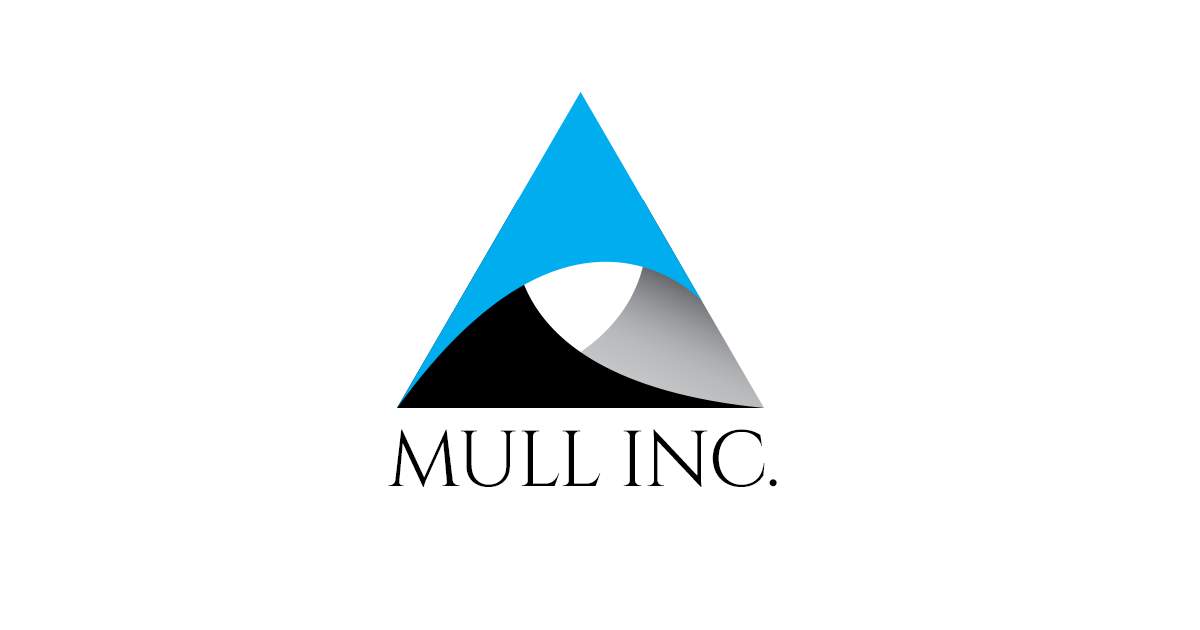
<style>
.page{position:relative;width:1200px;height:630px;background:#ffffff}
.page>*{position:absolute;margin:0}
.t1{font:79.1px "Cinzel-Regular";letter-spacing:-0.023em;color:#000000}
</style>
<div class="page">
<p class="t1" style="left:388px;top:429px;width:389px;height:58px">MULL INC.</p>
</div>
